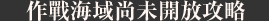
<style>
.page{position:relative;width:269px;height:21px;background:#333333}
.page>*{position:absolute;margin:0}
.t1{font:22px "RyuminPr6N-ExBold";color:#fff6f2}
</style>
<div class="page">
<p class="t1" style="left:26px;top:0px;width:219px;height:21px">作戰海域尚未開放攻略</p>
</div>
